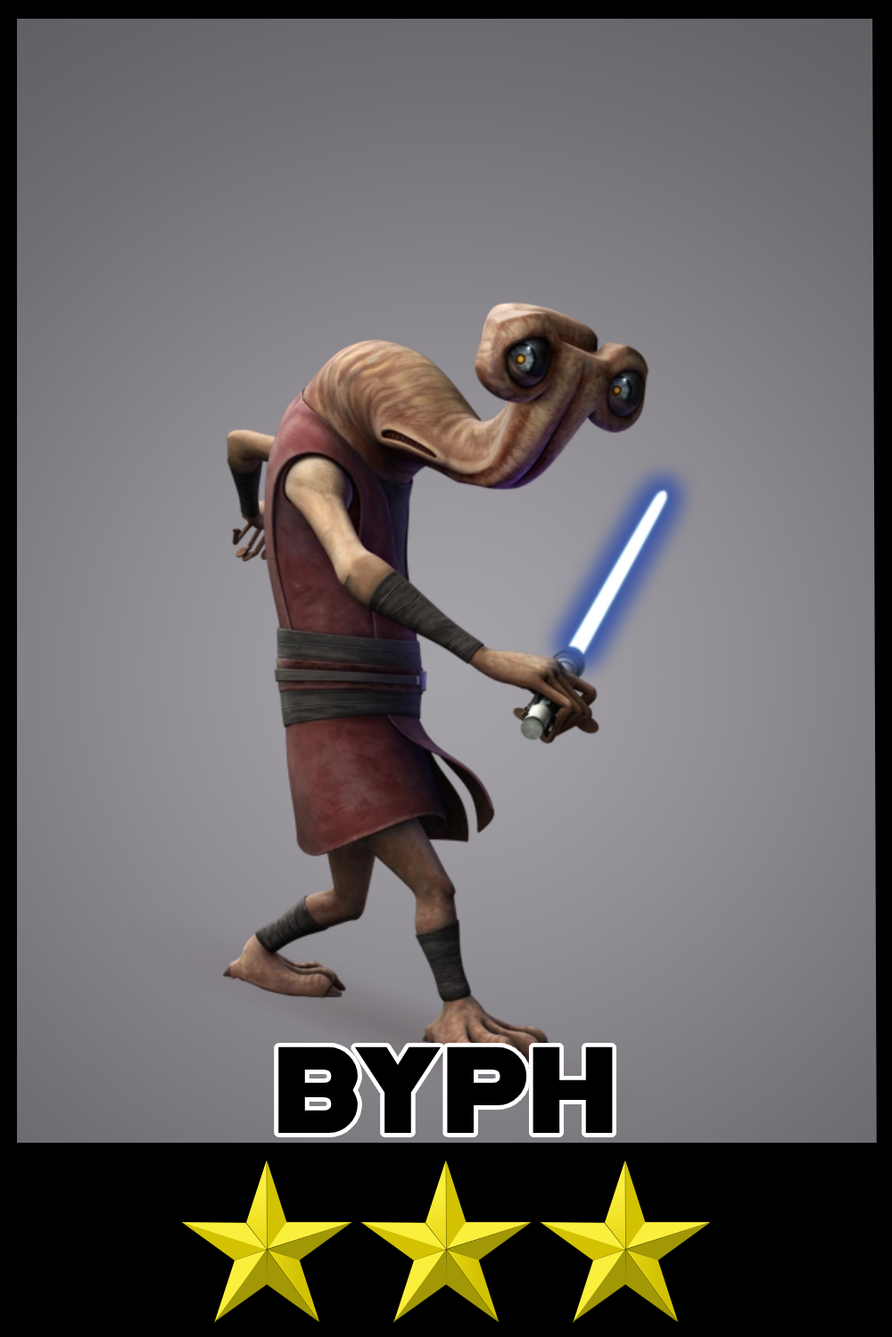
<style>
.page{position:relative;width:892px;height:1337px}
.page>*{position:absolute;margin:0}
.t1{font:131.9px "DistantGalaxy";color:#000000}
</style>
<div class="page">
<p class="t1" style="left:278px;top:1047px;width:335px;height:86px">byph</p>
</div>
